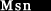
<style>
.page{position:relative;width:51px;height:11px;background:#000000}
.page>*{position:absolute;margin:0}
.t1{font:14px "Georgia";letter-spacing:0.1em;color:#ffffff;font-weight:bold}
</style>
<div class="page">
<p class="t1" style="left:0px;top:0px;width:31px;height:11px">Msn</p>
</div>
